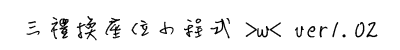
<style>
.page{position:relative;width:400px;height:50px;background:#ffffff}
.page>*{position:absolute;margin:0}
.t1{font:29.3px "DFLiu-W3-WIN-BF";letter-spacing:-0.09em;color:#000000}
</style>
<div class="page">
<p class="t1" style="left:26px;top:16px;width:352px;height:25px">三禮換座位小程式 &gt;w&lt; ver1.02</p>
</div>
